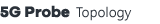
<style>
.page{position:relative;width:160px;height:24px;background:#ffffff}
.page>*{position:absolute;margin:0}
.t1{font:15.5px "GalanoGrotesque-Bold";color:#2a3139}
.t2{font:13.5px "MalgunGothicRegular";letter-spacing:-0.01em;color:#2a3139}
</style>
<div class="page">
<p class="t1" style="left:0px;top:5px;width:70px;height:13px">5G Probe</p>
<p class="t2" style="left:76px;top:6px;width:56px;height:15px">Topology</p>
</div>
